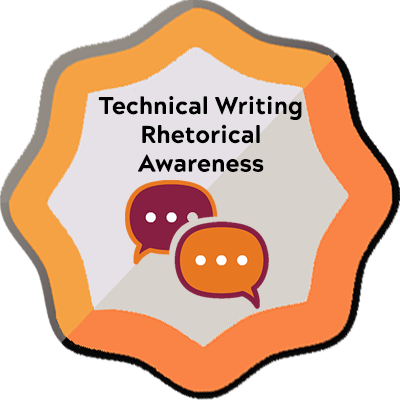
<style>
.page{position:relative;width:400px;height:400px;background:#ffffff}
.page>*{position:absolute;margin:0}
.t1{font:24px "AcherusGrotesqueExtraBold";color:#000000}
</style>
<div class="page">
<p class="t1" style="left:98px;top:96px;width:204px;height:76px;text-align:center">Technical Writing<br>Rhetorical<br>Awareness</p>
</div>
